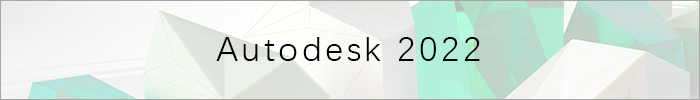
<style>
.page{position:relative;width:700px;height:100px}
.page>*{position:absolute;margin:0}
.t1{font:34.8px "DengXian";letter-spacing:0.1em;color:#000000}
</style>
<div class="page">
<p class="t1" style="left:216px;top:37px;width:264px;height:24px">Autodesk 2022</p>
</div>
